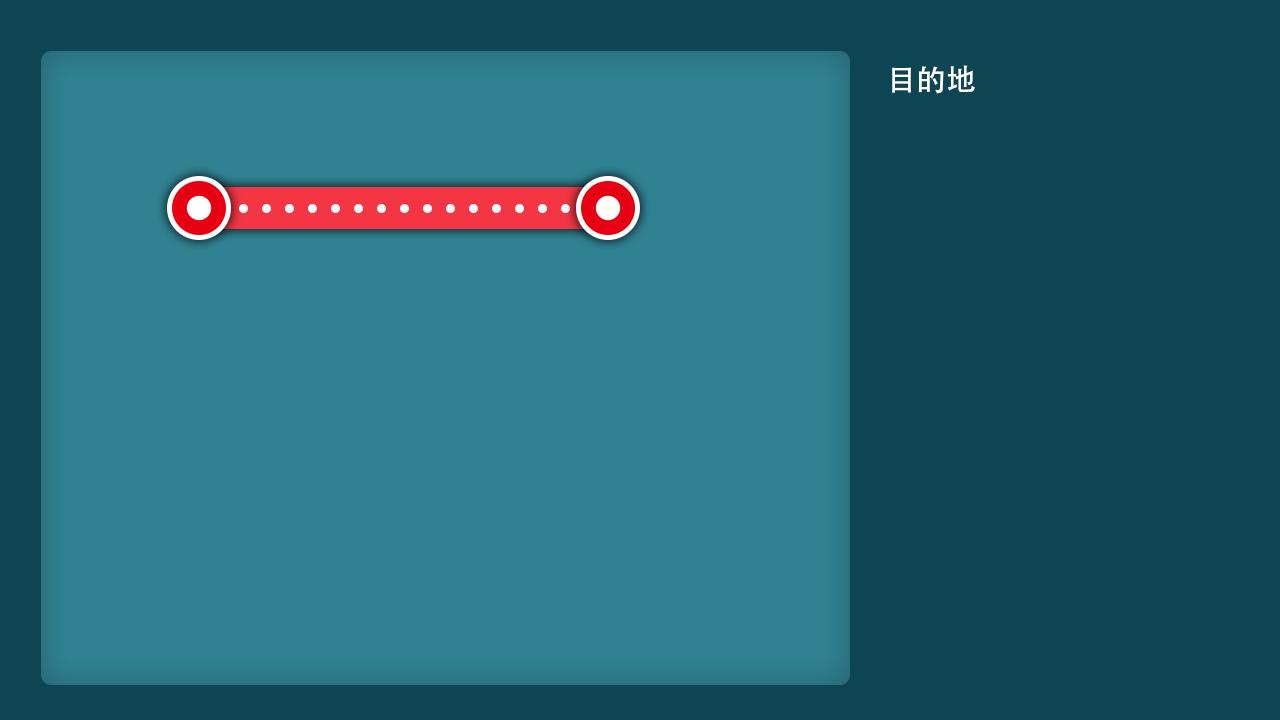
<style>
.page{position:relative;width:1280px;height:720px;background:#0d4652}
.page>*{position:absolute;margin:0}
.t1{font:30px "AdobeHeitiStd-Regular";color:#ffffff}
</style>
<div class="page">
<p class="t1" style="left:892px;top:65px;width:83px;height:29px">目的地</p>
</div>
